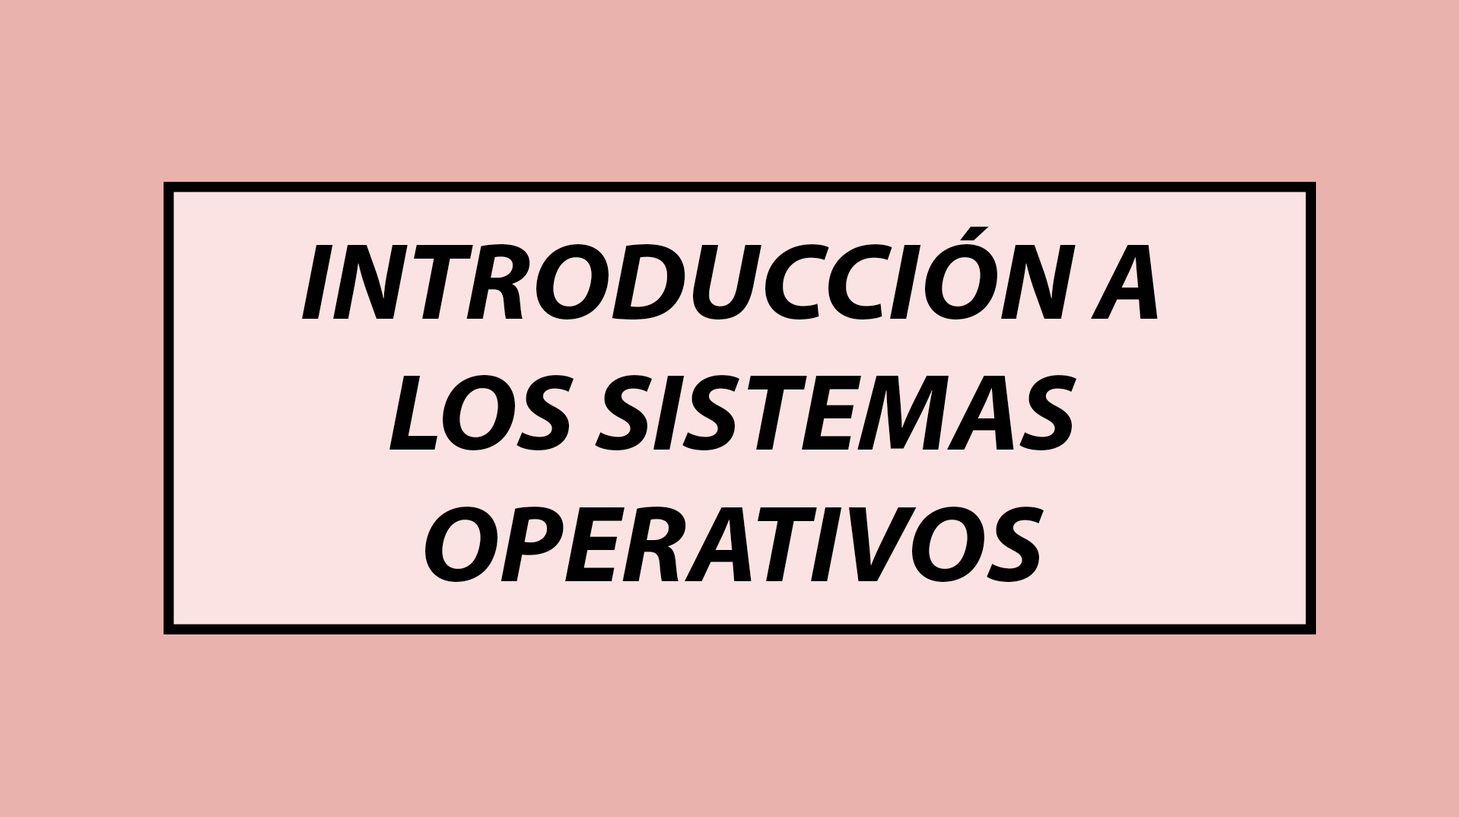
<style>
.page{position:relative;width:1459px;height:817px;background:#eab2ac}
.page>*{position:absolute;margin:0}
.t1{font:109.6px "MyriadPro-BoldIt";color:#000000}
</style>
<div class="page">
<p class="t1" style="left:302px;top:227px;width:856px;height:355px;text-align:center">INTRODUCCIÓN A<br>LOS SISTEMAS<br>OPERATIVOS</p>
</div>
